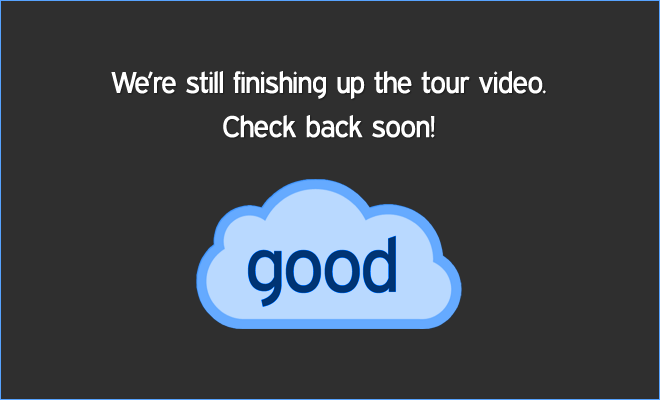
<style>
.page{position:relative;width:660px;height:400px;background:#2f2f2f}
.page>*{position:absolute;margin:0}
.t1{font:30px/22px "ExpresswayRg-Regular";color:#ffffff}
</style>
<div class="page">
<p class="t1" style="left:111px;top:71px;width:435px;height:67px;text-align:center">We’re still finishing up the tour video.<br><br>Check back soon!</p>
</div>
